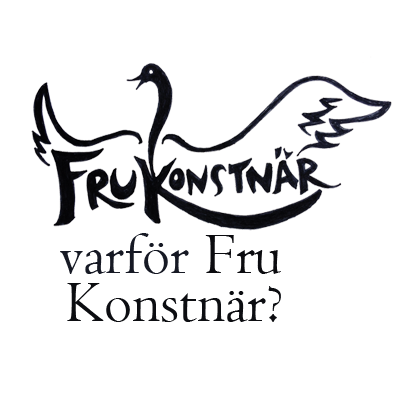
<style>
.page{position:relative;width:400px;height:397px;background:#ffffff}
.page>*{position:absolute;margin:0}
.t1{font:60px "Centaur";color:#161924}
.t2{font:60px "Centaur";color:#0b0b0f}
.t3{font:60px "Centaur";color:#0c0d11}
</style>
<div class="page">
<p class="t1" style="left:60px;top:233px;width:129px;height:41px">varför</p>
<p class="t2" style="left:205px;top:235px;width:76px;height:39px">Fru</p>
<p class="t3" style="left:67px;top:283px;width:214px;height:39px">Konstnär?</p>
</div>
